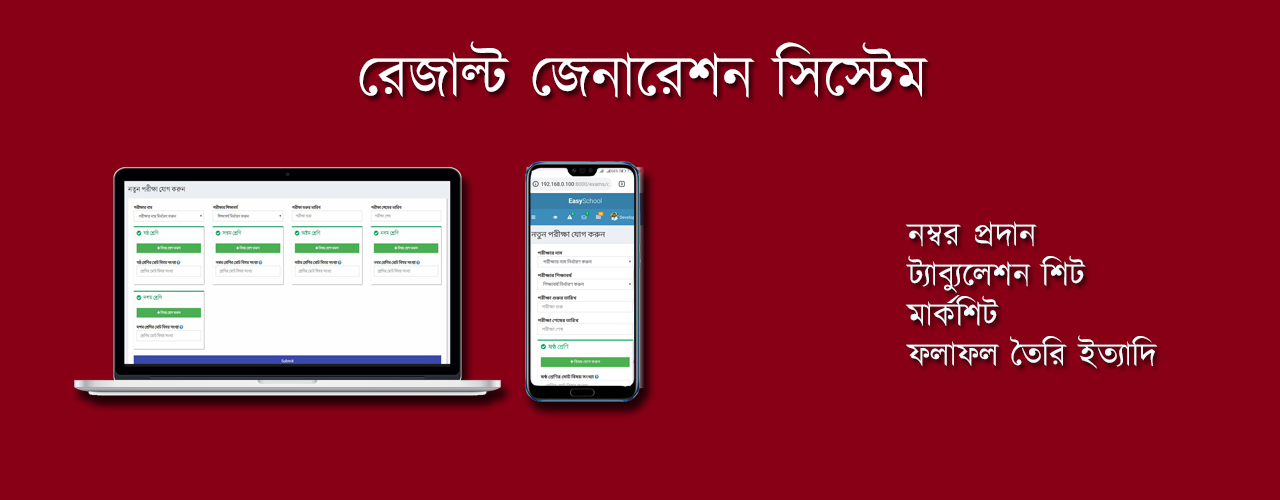
<style>
.page{position:relative;width:1280px;height:500px;background:#880016}
.page>*{position:absolute;margin:0}
.t1{font:60px "Kalpurush";color:#ffffff}
.t2{font:33.3px "Kalpurush";color:#ffffff}
</style>
<div class="page">
<p class="t1" style="left:359px;top:41px;width:569px;height:57px">রেজাল্ট জেনারেশন সিস্টেম</p>
<p class="t2" style="left:905px;top:221px;width:253px;height:148px;text-align:right">নম্বর প্রদান<br>ট্যাব্যুলেশন শিট<br>মার্কশিট<br>ফলাফল তৈরি ইত্যাদি</p>
</div>
